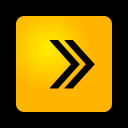
<style>
.page{position:relative;width:128px;height:128px;background:#000000}
.page>*{position:absolute;margin:0}
.t1{font:50px "MicrosoftYaHei";color:#000000;font-weight:bold;scale:2 1}
</style>
<div class="page">
<p class="t1" style="left:49px;top:40px;width:46px;height:49px">》</p>
</div>
